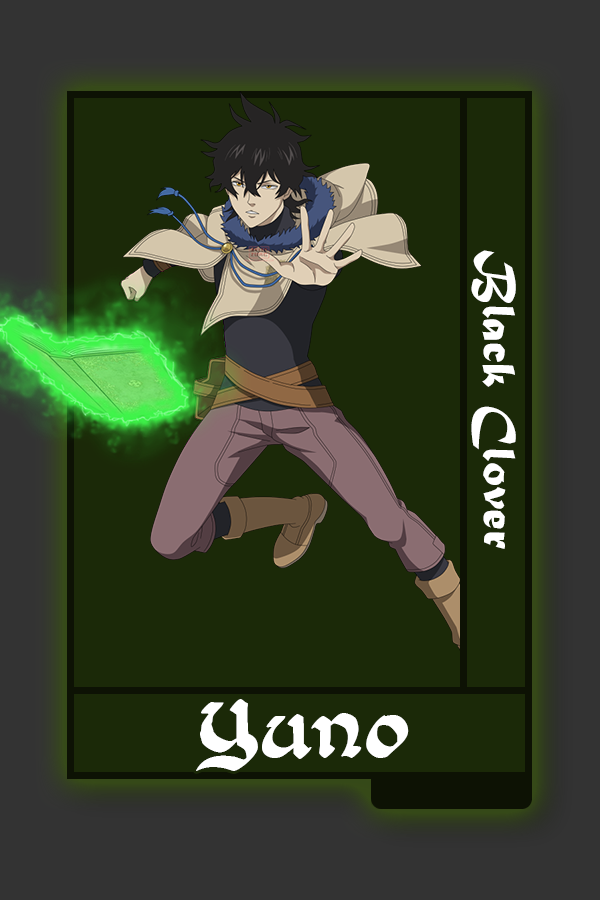
<style>
.page{position:relative;width:600px;height:900px;background:#1b2908}
.page>*{position:absolute;margin:0}
.t1{font:48.8px "MaturaMTScriptCapitals";color:#ffffff}
.t2{font:70.1px "FloranteatLaura";color:#ffffff}
</style>
<div class="page">
<p class="t1" style="left:471px;top:250px;width:45px;height:299px;rotate:90deg">Black Clover</p>
<p class="t2" style="left:196px;top:699px;width:213px;height:72px">Yuno</p>
</div>
